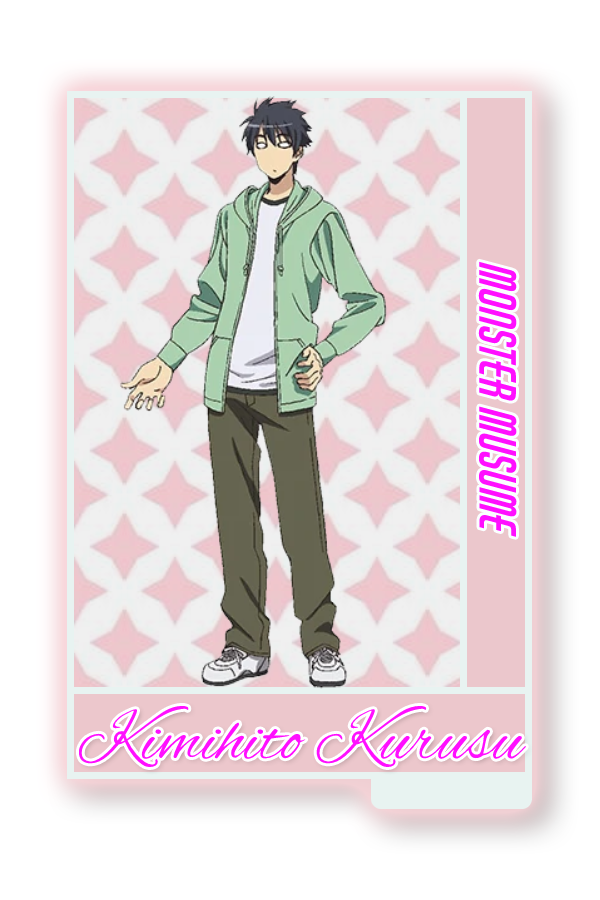
<style>
.page{position:relative;width:600px;height:900px;background:#ffffff}
.page>*{position:absolute;margin:0}
.t1{font:48.8px "AirAmerica-Regular";color:#ff0fff}
.t2{font:70px "AlexBrush-Regular";color:#ff0fff}
</style>
<div class="page">
<p class="t1" style="left:478px;top:261px;width:39px;height:276px;rotate:90deg">Monster Musume</p>
<p class="t2" style="left:78px;top:705px;width:448px;height:63px">Kimihito Kurusu</p>
</div>
